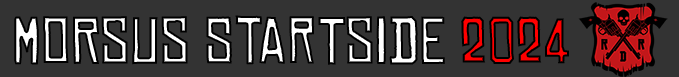
<style>
.page{position:relative;width:679px;height:77px;background:#333333}
.page>*{position:absolute;margin:0}
.t1{font:64px "ChineseRocksRg-Regular"}
</style>
<div class="page">
<p class="t1" style="left:14px;top:15px;width:555px;height:50px">MorSus Startside 2024</p>
</div>
